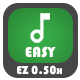
<style>
.page{position:relative;width:80px;height:80px;background:#464646}
.page>*{position:absolute;margin:0}
.t1{font:15px "Bauhaus93";color:#ffffff}
.t2{font:12px "Bauhaus93";color:#ffffff}
</style>
<div class="page">
<p class="t1" style="left:25px;top:46px;width:31px;height:12px">EASY</p>
<p class="t2" style="left:17px;top:65px;width:45px;height:10px">EZ 0.50x</p>
</div>
